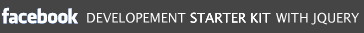
<style>
.page{position:relative;width:364px;height:33px;background:#454545}
.page>*{position:absolute;margin:0}
.t1{font:13px "LucidaSansUnicode";color:#ffffff;text-transform:uppercase}
</style>
<div class="page">
<p class="t1" style="left:87px;top:12px;width:99px;height:11px">Developement</p>
<p class="t1" style="left:190px;top:12px;width:81px;height:11px">Starter Kit</p>
<p class="t1" style="left:190px;top:12px;width:81px;height:11px">Starter Kit</p>
<p class="t1" style="left:190px;top:12px;width:81px;height:11px">Starter Kit</p>
<p class="t1" style="left:276px;top:12px;width:83px;height:13px">with Jquery</p>
</div>
